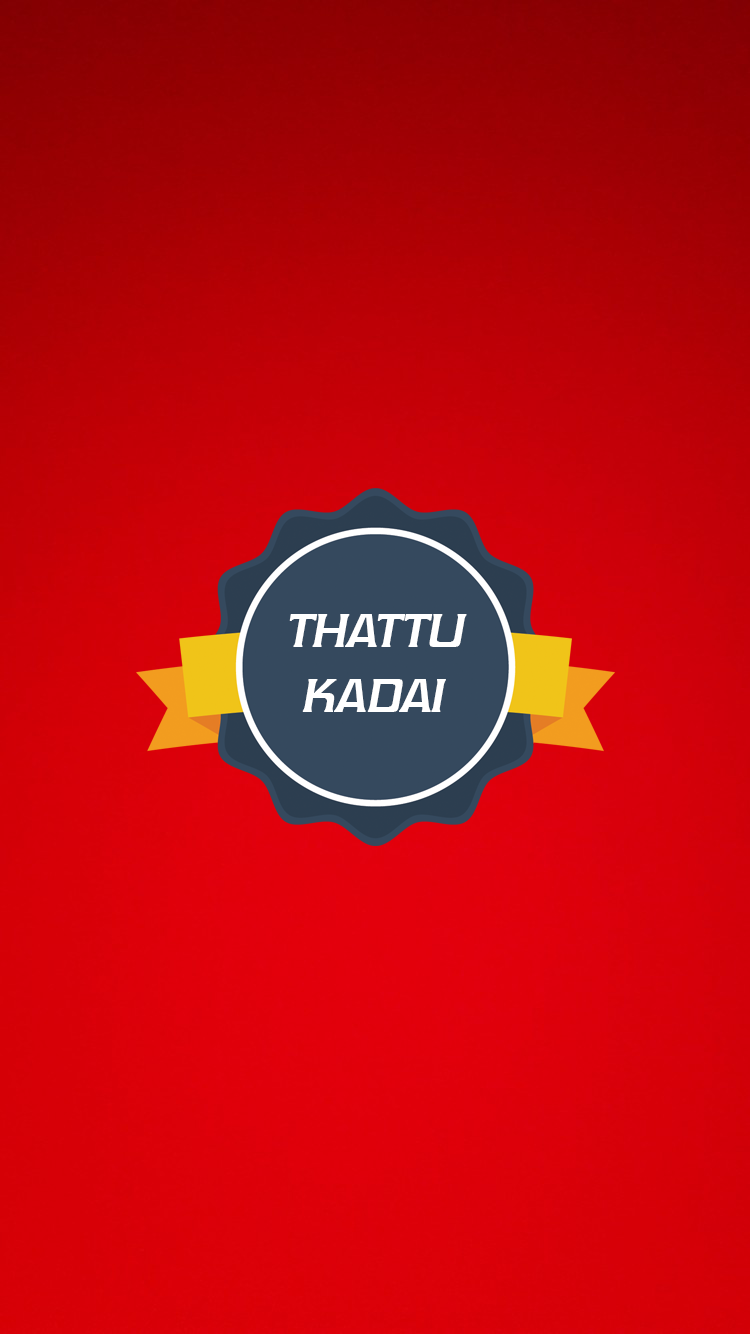
<style>
.page{position:relative;width:750px;height:1334px}
.page>*{position:absolute;margin:0}
.t1{font:53.7px "Vibrocentric";color:#ffffff;font-weight:bold;font-style:italic}
</style>
<div class="page">
<p class="t1" style="left:289px;top:614px;width:178px;height:98px">THATTU<br> KADAI</p>
</div>
